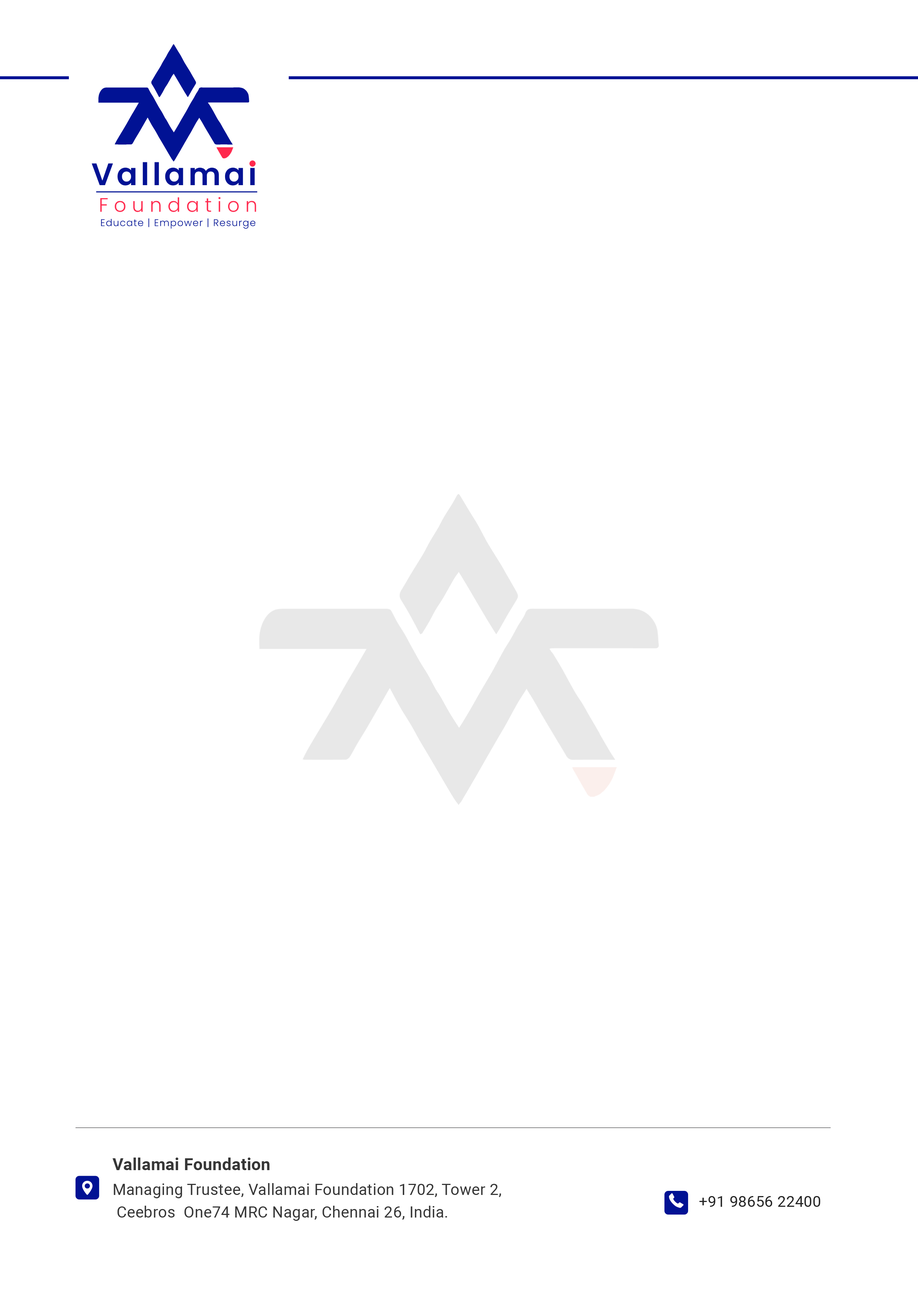
<style>
.page{position:relative;width:918px;height:1299px;background:#ffffff}
.page>*{position:absolute;margin:0}
.t1{font:15.5px/17.8px "Roboto-Regular";letter-spacing:0.016em;color:#363636}
.t2{font:16.6px/17.8px "Roboto-Bold";letter-spacing:0.016em;color:#363636}
.t3{font:15.2px "Roboto-Regular";letter-spacing:0.017em;color:#252525}
</style>
<div class="page">
<p class="t1" style="left:113px;top:1157px;width:388px;height:64px"><span class="t2">Vallamai Foundation<br></span>Managing Trustee, Vallamai Foundation 1702, Tower 2,<br> Ceebros  One74 MRC Nagar, Chennai 26, India.</p>
<p class="t3" style="left:699px;top:1196px;width:121px;height:11px">+91 98656 22400</p>
</div>
